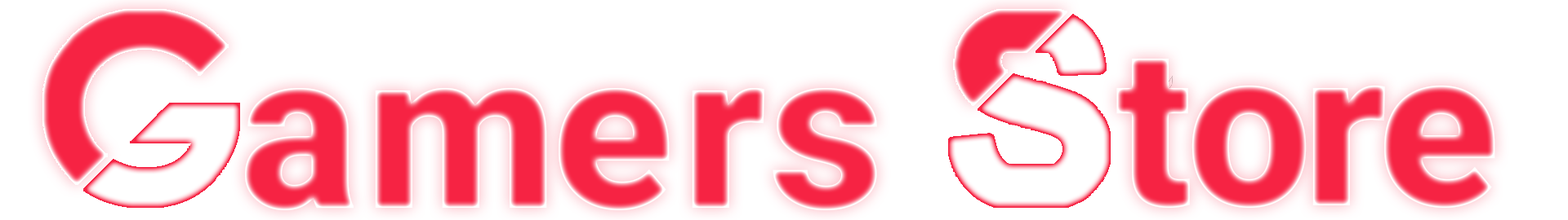
<style>
.page{position:relative;width:1568px;height:220px;background:#ffffff}
.page>*{position:absolute;margin:0}
.t1{font:222.9px "Roboto-Black";color:#f62343}
.t2{font:223.2px "Roboto-Black";color:#f62343}
</style>
<div class="page">
<p class="t1" style="left:1116px;top:59px;width:74px;height:149px">t</p>
<p class="t2" style="left:245px;top:88px;width:109px;height:123px">a</p>
<p class="t2" style="left:375px;top:88px;width:172px;height:120px">m</p>
<p class="t2" style="left:559px;top:88px;width:111px;height:123px">e</p>
<p class="t2" style="left:692px;top:88px;width:72px;height:120px">r</p>
<p class="t2" style="left:773px;top:88px;width:104px;height:123px">s</p>
<p class="t1" style="left:1192px;top:86px;width:115px;height:122px">o</p>
<p class="t1" style="left:1312px;top:86px;width:73px;height:120px">r</p>
<p class="t1" style="left:1384px;top:86px;width:111px;height:122px">e</p>
</div>
